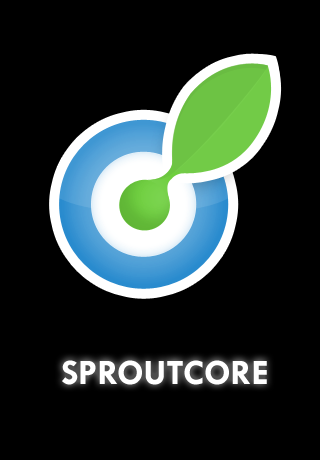
<style>
.page{position:relative;width:320px;height:460px;background:#000000}
.page>*{position:absolute;margin:0}
.t1{font:36px "TwCenMT-Bold";color:#ffffff}
</style>
<div class="page">
<p class="t1" style="left:62px;top:360px;width:205px;height:25px">SPROUTCORE</p>
</div>
